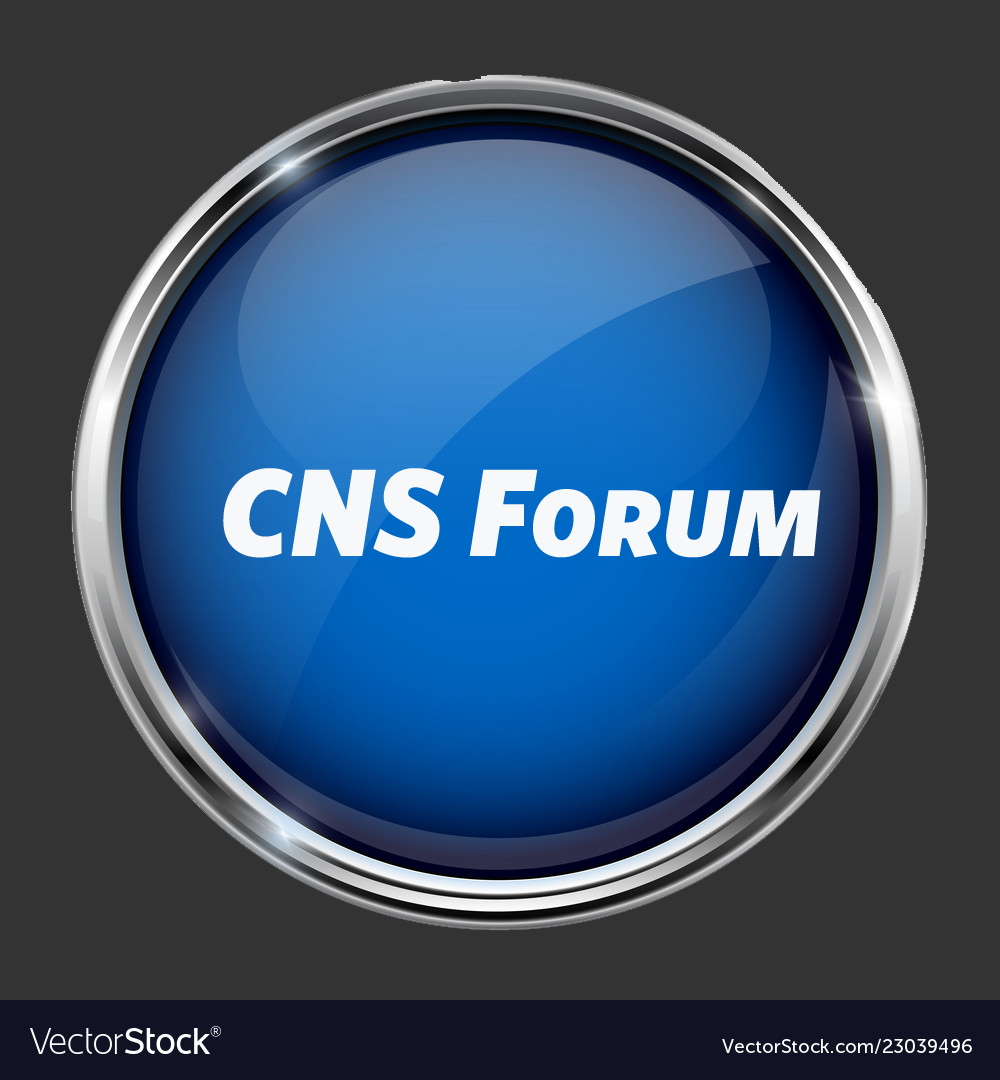
<style>
.page{position:relative;width:1000px;height:1080px;background:#333333}
.page>*{position:absolute;margin:0}
.t1{font:125px "Whitney-BlackItalicSC";color:#f6f8fa}
</style>
<div class="page">
<p class="t1" style="left:223px;top:468px;width:598px;height:90px">CNS Forum</p>
</div>
